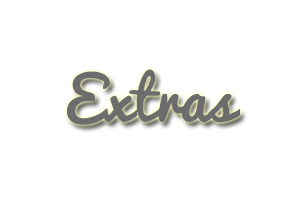
<style>
.page{position:relative;width:300px;height:200px;background:#ffffff}
.page>*{position:absolute;margin:0}
.t1{font:60px "Pacifico-Regular";color:#6c6c6c}
</style>
<div class="page">
<p class="t1" style="left:66px;top:69px;width:174px;height:56px">Extras</p>
</div>
